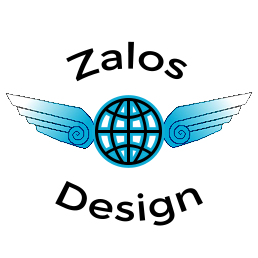
<style>
.page{position:relative;width:258px;height:258px;background:#ffffff}
.page>*{position:absolute;margin:0}
.t1{font:36px "Montserrat-Regular";color:#000000}
</style>
<div class="page">
<p class="t1" style="left:66px;top:41px;width:122px;height:41px">Zalos</p>
<p class="t1" style="left:55px;top:180px;width:148px;height:46px">Design</p>
</div>
